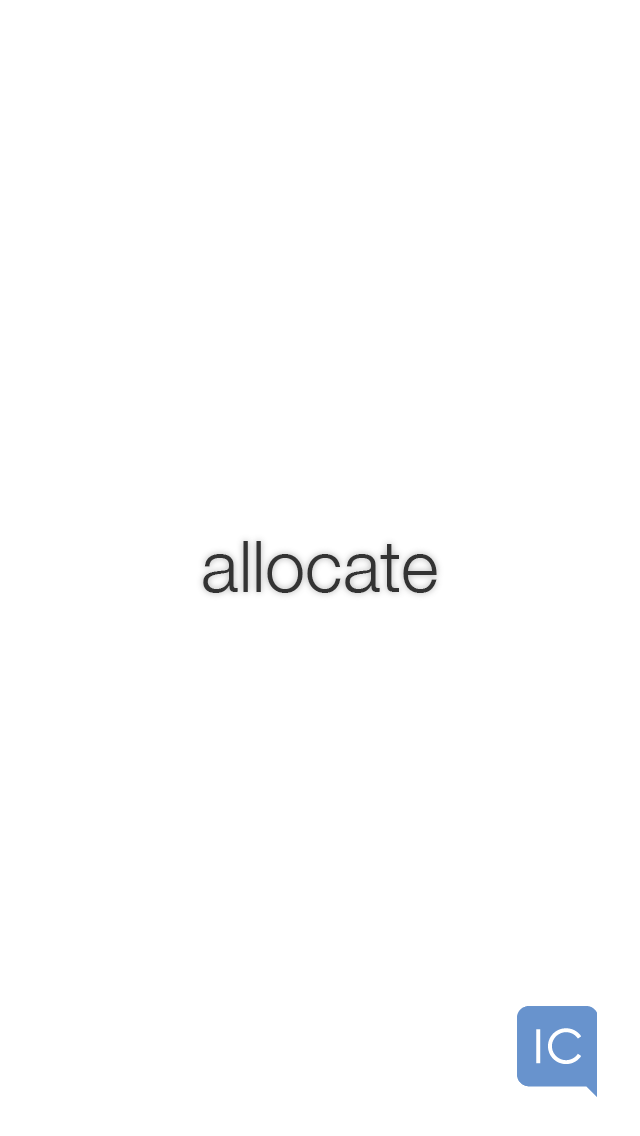
<style>
.page{position:relative;width:640px;height:1136px;background:#ffffff}
.page>*{position:absolute;margin:0}
.t1{font:72px "HelveticaNeue-Light";color:#333333}
</style>
<div class="page">
<p class="t1" style="left:203px;top:541px;width:234px;height:52px">allocate</p>
</div>
